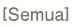
<style>
.page{position:relative;width:72px;height:27px;background:#ffffff}
.page>*{position:absolute;margin:0}
.t1{font:18px "FutoGoB101Pr5-Bold";color:#6e665b}
.t2{font:14.9px "FutoGoB101Pr5-Bold";color:#6e665b;scale:1.2 1}
</style>
<div class="page">
<p class="t1" style="left:3px;top:7px;width:66px;height:14px;opacity:0.9"><span class="t2">[</span>Semua<span class="t2">]</span></p>
</div>
